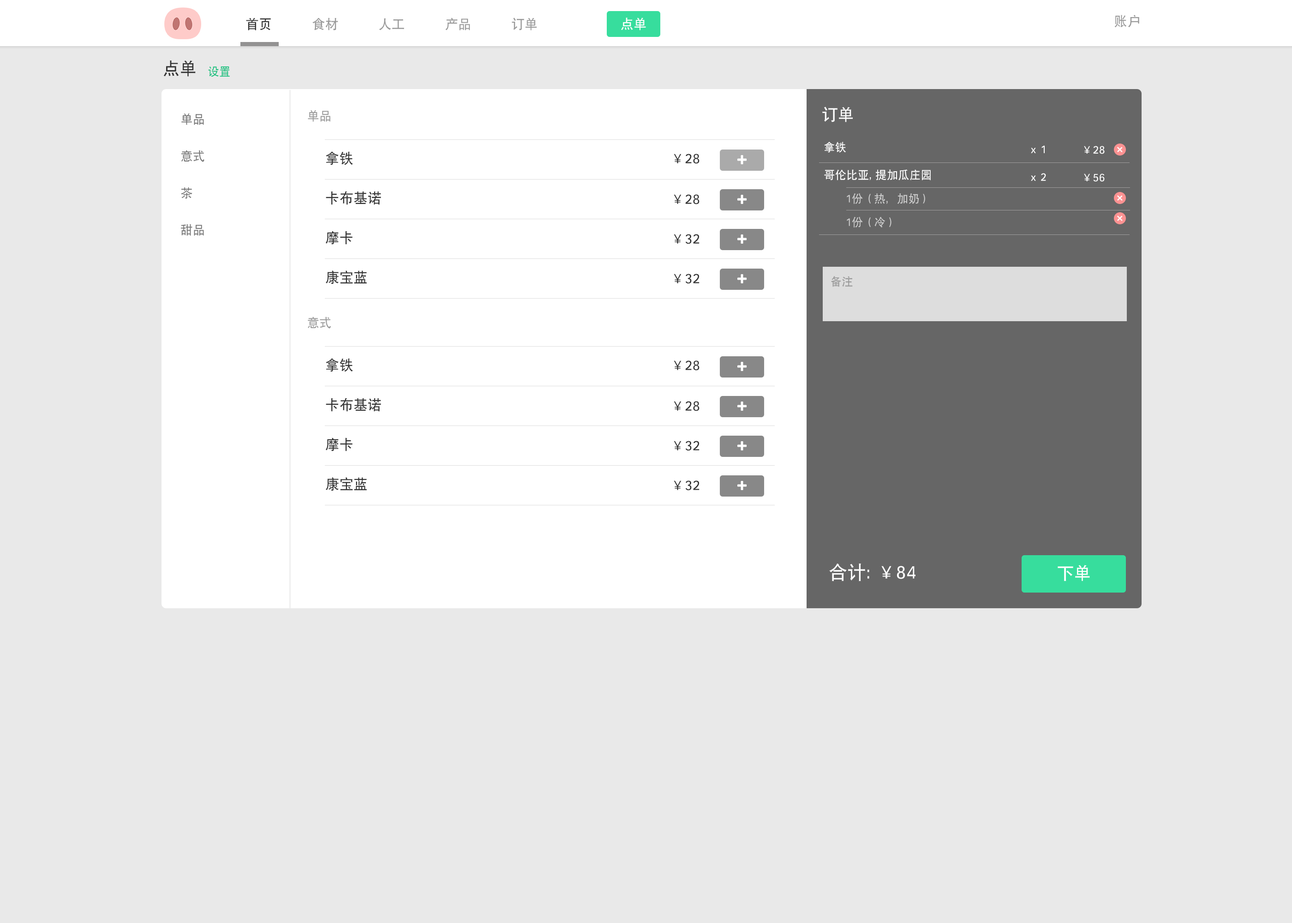
<style>
.page{position:relative;width:1292px;height:923px;background:#e9e9e9}
.page>*{position:absolute;margin:0}
.t1{font:12.9px "SIL-Hei-Med-Jian";letter-spacing:0.02em;color:#999999}
.t2{font:12.9px "SIL-Hei-Med-Jian";letter-spacing:0.02em;color:#333333}
.t3{font:12.9px "SIL-Hei-Med-Jian";letter-spacing:0.02em;color:#ffffff}
.t4{font:16.6px "SIL-Hei-Med-Jian";letter-spacing:0.02em;color:#333333}
.t5{font:11.1px "SIL-Hei-Med-Jian";letter-spacing:0.02em;color:#14c07e}
.t6{font:12px/36.9px "SIL-Hei-Med-Jian";letter-spacing:0.02em;color:#777777}
.t7{font:12px "SIL-Hei-Med-Jian";letter-spacing:0.02em;color:#999999}
.t8{font:15.7px "SIL-Hei-Med-Jian";letter-spacing:0.02em;color:#ffffff}
.t9{font:11.1px/27.7px "SIL-Hei-Med-Jian";letter-spacing:0.02em;color:#ffffff}
.t10{font:15.2px "SIL-Hei-Med-Jian";letter-spacing:0.02em;color:#ffffff}
.t11{font:13.8px "SIL-Hei-Med-Jian";letter-spacing:0.02em;color:#333333}
.t12{font:11.1px "SIL-Hei-Med-Jian";letter-spacing:0.02em;color:#cccccc}
.t13{font:11.1px "SIL-Hei-Med-Jian";letter-spacing:0.02em;color:#999999}
.t14{font:18.5px "SIL-Hei-Med-Jian";letter-spacing:0.02em;color:#ffffff}
.t15{font:16.6px "SIL-Hei-Med-Jian";letter-spacing:0.02em;color:#ffffff}
</style>
<div class="page">
<p class="t1" style="left:246px;top:18px;width:291px;height:12px"><span class="t2">首页</span>   食材   人工   产品   订单</p>
<p class="t3" style="left:621px;top:18px;width:25px;height:12px">点单</p>
<p class="t1" style="left:1114px;top:15px;width:25px;height:12px">账户</p>
<p class="t4" style="left:163px;top:60px;width:33px;height:17px">点单</p>
<p class="t5" style="left:208px;top:66px;width:22px;height:11px">设置</p>
<p class="t6" style="left:181px;top:113px;width:23px;height:123px">单品<br>意式<br>茶<br>甜品</p>
<p class="t7" style="left:308px;top:110px;width:22px;height:12px">单品</p>
<p class="t8" style="left:822px;top:107px;width:31px;height:15px">订单</p>
<p class="t9" style="left:824px;top:142px;width:107px;height:38px">拿铁<br>哥伦比亚, 提加瓜庄园</p>
<p class="t9" style="left:1031px;top:145px;width:15px;height:36px">x 1<br>x 2</p>
<p class="t9" style="left:1084px;top:146px;width:21px;height:36px">¥28<br>¥56</p>
<p class="t10" style="left:1117px;top:147px;width:6px;height:5px;rotate:45deg">+</p>
<p class="t11" style="left:326px;top:151px;width:27px;height:14px">拿铁</p>
<p class="t11" style="left:674px;top:154px;width:26px;height:10px">¥28</p>
<p class="t11" style="left:326px;top:191px;width:55px;height:14px">卡布基诺</p>
<p class="t11" style="left:674px;top:194px;width:26px;height:10px">¥28</p>
<p class="t12" style="left:847px;top:193px;width:78px;height:11px">1份（热，加奶）</p>
<p class="t10" style="left:1117px;top:195px;width:6px;height:6px;rotate:45deg">+</p>
<p class="t12" style="left:847px;top:217px;width:45px;height:10px">1份（冷）</p>
<p class="t10" style="left:1117px;top:215px;width:6px;height:6px;rotate:45deg">+</p>
<p class="t11" style="left:325px;top:231px;width:28px;height:14px">摩卡</p>
<p class="t11" style="left:674px;top:234px;width:26px;height:10px">¥32</p>
<p class="t11" style="left:326px;top:270px;width:41px;height:14px">康宝蓝</p>
<p class="t11" style="left:674px;top:274px;width:26px;height:10px">¥32</p>
<p class="t13" style="left:831px;top:276px;width:22px;height:11px">备注</p>
<p class="t7" style="left:308px;top:317px;width:23px;height:12px">意式</p>
<p class="t11" style="left:326px;top:358px;width:27px;height:14px">拿铁</p>
<p class="t11" style="left:674px;top:360px;width:26px;height:11px">¥28</p>
<p class="t11" style="left:326px;top:398px;width:55px;height:14px">卡布基诺</p>
<p class="t11" style="left:674px;top:401px;width:26px;height:10px">¥28</p>
<p class="t11" style="left:325px;top:437px;width:28px;height:14px">摩卡</p>
<p class="t11" style="left:674px;top:441px;width:26px;height:10px">¥32</p>
<p class="t11" style="left:326px;top:477px;width:41px;height:14px">康宝蓝</p>
<p class="t11" style="left:674px;top:480px;width:26px;height:11px">¥32</p>
<p class="t14" style="left:829px;top:563px;width:87px;height:18px">合计: ¥84</p>
<p class="t15" style="left:1058px;top:565px;width:32px;height:16px">下单</p>
</div>
